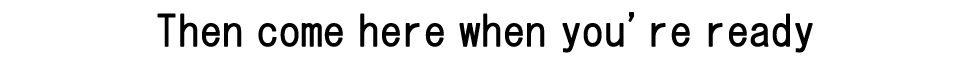
<style>
.page{position:relative;width:972px;height:69px;background:#ffffff}
.page>*{position:absolute;margin:0}
.t1{font:41.7px "HGGothicM";color:#000000;font-weight:bold}
</style>
<div class="page">
<p class="t1" style="left:157px;top:12px;width:656px;height:41px">Then come here when you're ready</p>
</div>
